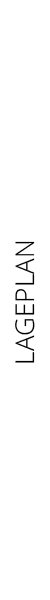
<style>
.page{position:relative;width:50px;height:600px;background:#ffffff}
.page>*{position:absolute;margin:0}
.t1{font:26px "OpenSans-Light";color:#000000}
</style>
<div class="page">
<p class="t1" style="left:15px;top:241px;width:20px;height:122px;rotate:-90deg">LAGEPLAN</p>
</div>
